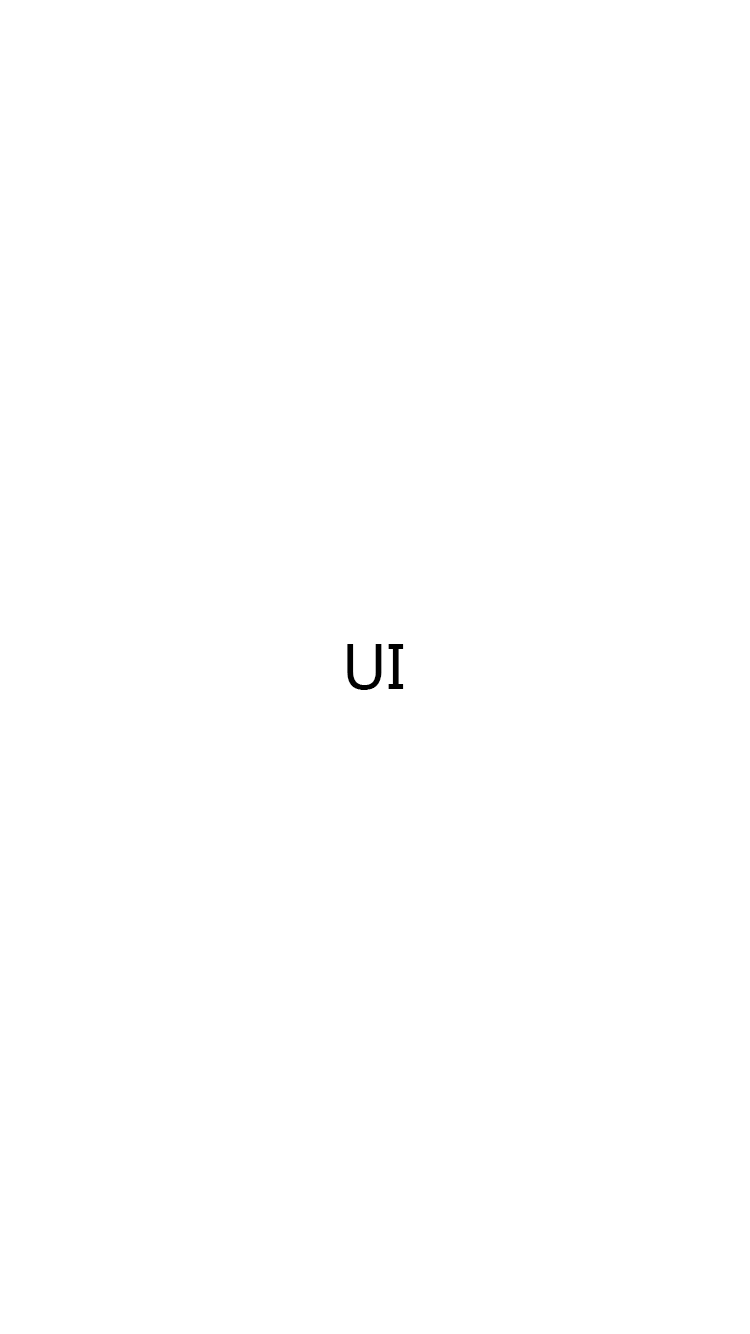
<style>
.page{position:relative;width:750px;height:1334px;background:#ffffff}
.page>*{position:absolute;margin:0}
.t1{font:60px "MicrosoftYaHei";color:#000000}
</style>
<div class="page">
<p class="t1" style="left:347px;top:644px;width:57px;height:46px">UI</p>
</div>
